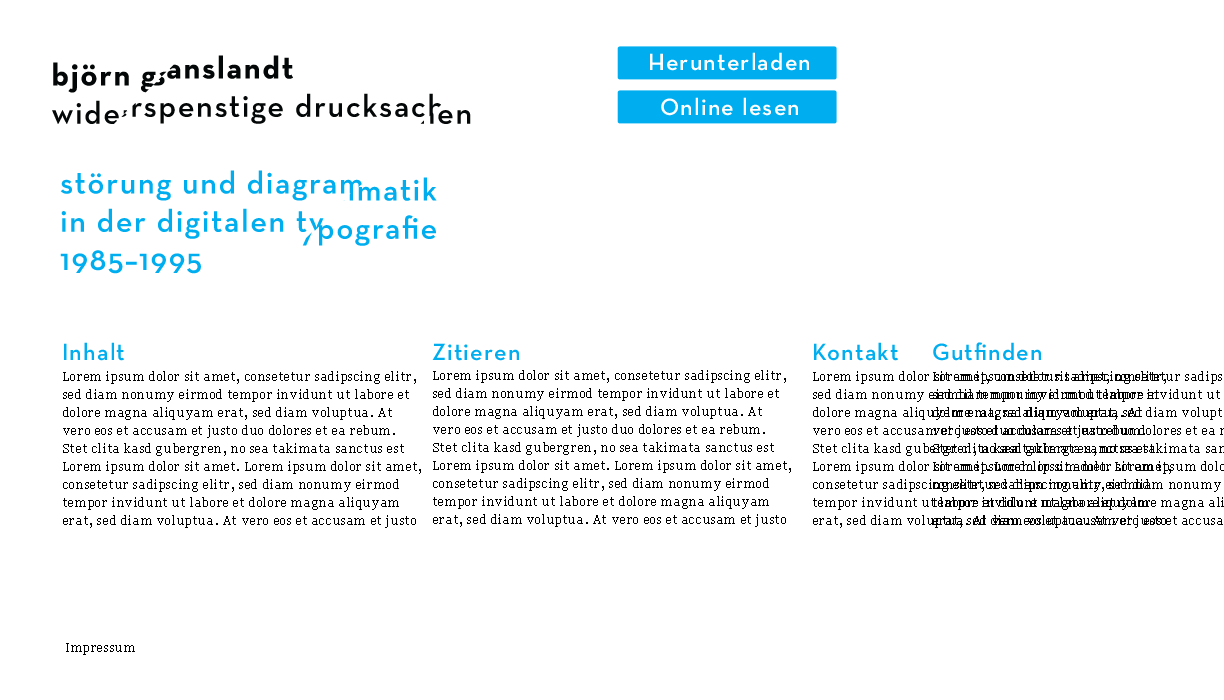
<style>
.page{position:relative;width:1224px;height:700px;background:#ffffff}
.page>*{position:absolute;margin:0}
.t1{font:24px "NeutraText-Demi";letter-spacing:0.05em;color:#ffffff}
.t2{font:24px "NeutraText-Demi";letter-spacing:0.05em;color:#00aeef}
.t3{font:12px/18px "Georgia";letter-spacing:0.05em;color:#000000}
.t4{font:12px "Georgia";letter-spacing:0.05em;color:#000000}
</style>
<div class="page">
<p class="t1" style="left:650px;top:52px;width:159px;height:19px">Herunterladen</p>
<p class="t1" style="left:661px;top:97px;width:137px;height:19px">Online lesen</p>
<p class="t2" style="left:64px;top:342px;width:60px;height:19px">Inhalt</p>
<p class="t2" style="left:814px;top:342px;width:84px;height:19px">Kontakt</p>
<p class="t2" style="left:933px;top:342px;width:108px;height:19px">Gutfinden</p>
<p class="t2" style="left:432px;top:343px;width:87px;height:18px">Zitieren</p>
<p class="t3" style="left:63px;top:371px;width:358px;height:157px">Lorem ipsum dolor sit amet, consetetur sadipscing elitr, sed diam nonumy eirmod tempor invidunt ut labore et dolore magna aliquyam erat, sed diam voluptua. At vero eos et accusam et justo duo dolores et ea rebum. Stet clita kasd gubergren, no sea takimata sanctus est Lorem ipsum dolor sit amet. Lorem ipsum dolor sit amet, consetetur sadipscing elitr, sed diam nonumy eirmod tempor invidunt ut labore et dolore magna aliquyam erat, sed diam voluptua. At vero eos et accusam et justo duo dolores et ea rebum. Stet clita kasd gubergren, no sea takimata sanctus est Lorem ipsum dolor sit amet.</p>
<p class="t3" style="left:433px;top:370px;width:358px;height:157px">Lorem ipsum dolor sit amet, consetetur sadipscing elitr, sed diam nonumy eirmod tempor invidunt ut labore et dolore magna aliquyam erat, sed diam voluptua. At vero eos et accusam et justo duo dolores et ea rebum. Stet clita kasd gubergren, no sea takimata sanctus est Lorem ipsum dolor sit amet. Lorem ipsum dolor sit amet, consetetur sadipscing elitr, sed diam nonumy eirmod tempor invidunt ut labore et dolore magna aliquyam erat, sed diam voluptua. At vero eos et accusam et justo duo dolores et ea rebum. Stet clita kasd gubergren, no sea takimata sanctus est Lorem ipsum dolor sit amet.</p>
<p class="t3" style="left:813px;top:371px;width:358px;height:157px">Lorem ipsum dolor sit amet, consetetur sadipscing elitr, sed diam nonumy eirmod tempor invidunt ut labore et dolore magna aliquyam erat, sed diam voluptua. At vero eos et accusam et justo duo dolores et ea rebum. Stet clita kasd gubergren, no sea takimata sanctus est Lorem ipsum dolor sit amet. Lorem ipsum dolor sit amet, consetetur sadipscing elitr, sed diam nonumy eirmod tempor invidunt ut labore et dolore magna aliquyam erat, sed diam voluptua. At vero eos et accusam et justo duo dolores et ea rebum. Stet clita kasd gubergren, no sea takimata sanctus est Lorem ipsum dolor sit amet.</p>
<p class="t4" style="left:66px;top:643px;width:69px;height:12px">Impressum</p>
</div>
